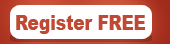
<style>
.page{position:relative;width:170px;height:44px;background:#ffffff}
.page>*{position:absolute;margin:0}
.t1{font:20.9px "Arial-Black";color:#c14833;scale:0.8 1}
</style>
<div class="page">
<p class="t1" style="left:16px;top:15px;width:129px;height:19px">Register FREE</p>
</div>
